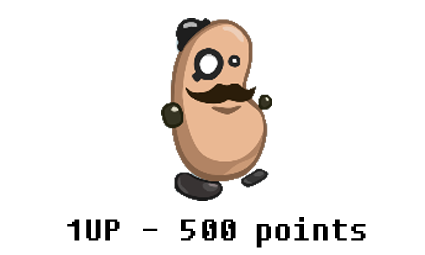
<style>
.page{position:relative;width:425px;height:255px;background:#ffffff}
.page>*{position:absolute;margin:0}
.t1{font:30px "Fixedsys";color:#000000}
</style>
<div class="page">
<p class="t1" style="left:67px;top:217px;width:299px;height:31px">1UP - 500 points</p>
</div>
